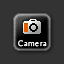
<style>
.page{position:relative;width:64px;height:64px;background:#333333}
.page>*{position:absolute;margin:0}
.t1{font:8px "Amira-Light";letter-spacing:0.075em;color:#ffffff}
</style>
<div class="page">
<p class="t1" style="left:18px;top:40px;width:29px;height:7px">Camera</p>
</div>
